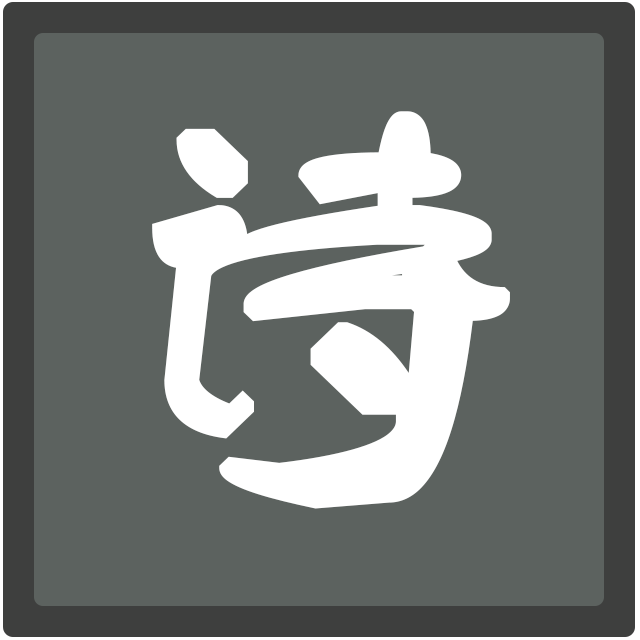
<style>
.page{position:relative;width:640px;height:640px;background:#5c625f}
.page>*{position:absolute;margin:0}
.t1{font:375.4px "Ò¶¸ùÓÑÌØÉ«¼òÌåÉý¼¶°æ";letter-spacing:0.1em;color:#ffffff;font-weight:bold;scale:1.04 1}
</style>
<div class="page">
<p class="t1" style="left:152px;top:111px;width:358px;height:398px">诗</p>
</div>
